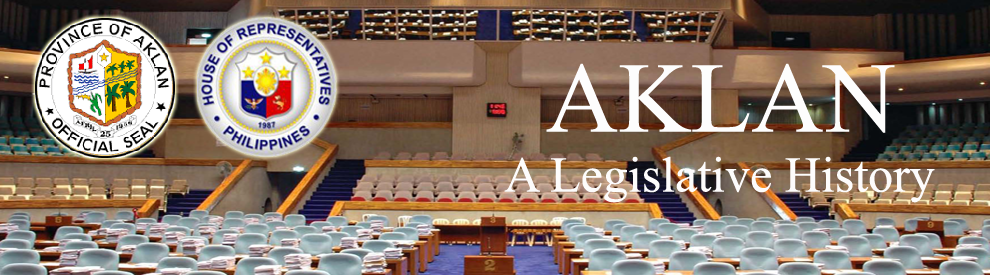
<style>
.page{position:relative;width:990px;height:275px}
.page>*{position:absolute;margin:0}
.t1{font:50px "TimesNewRomanPSMT";color:#fdfcfc}
.t2{font:100px "TimesNewRomanPSMT";color:#fdfdfd}
</style>
<div class="page">
<p class="t1" style="left:504px;top:63px;width:431px;height:140px;text-align:center"><span class="t2">AKLAN<br></span>A Legislative History</p>
</div>
